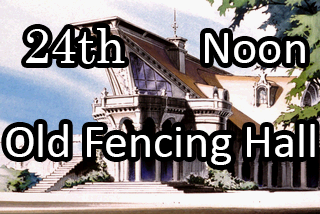
<style>
.page{position:relative;width:320px;height:214px}
.page>*{position:absolute;margin:0}
.t1{font:48px "Century";color:#ffffff}
.t2{font:48px "Calibri";color:#ffffff}
</style>
<div class="page">
<p class="t1" style="left:26px;top:28px;width:99px;height:36px">24th</p>
<p class="t2" style="left:205px;top:33px;width:100px;height:30px">Noon</p>
<p class="t2" style="left:6px;top:124px;width:309px;height:41px">Old Fencing Hall</p>
</div>
